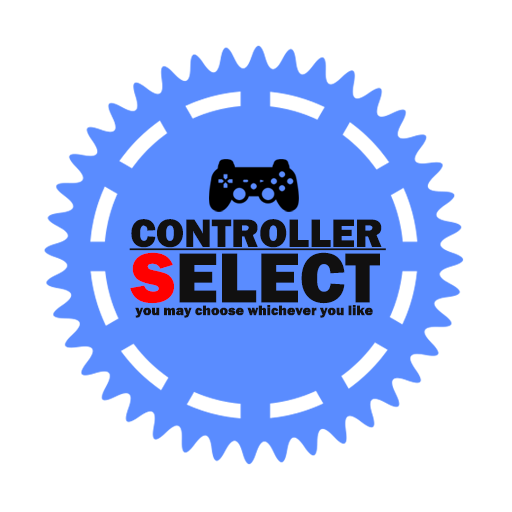
<style>
.page{position:relative;width:512px;height:512px;background:#ffffff}
.page>*{position:absolute;margin:0}
.t1{font:40.7px "FranklinGothic-Heavy";color:#111010}
.t2{font:72.9px "FranklinGothic-Heavy";color:#111010}
.t3{font:72.9px "FranklinGothic-Heavy";color:#ff0000}
.t4{font:14.3px "FranklinGothic-Heavy";color:#141313}
</style>
<div class="page">
<p class="t1" style="left:131px;top:219px;width:251px;height:29px">CONTROLLER</p>
<p class="t2" style="left:130px;top:252px;width:250px;height:52px"><span class="t3">S</span>ELECT</p>
<p class="t4" style="left:135px;top:305px;width:238px;height:13px">you may choose whichever you like</p>
</div>
